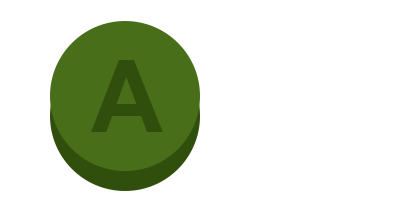
<style>
.page{position:relative;width:400px;height:200px;background:#ffffff}
.page>*{position:absolute;margin:0}
.t1{font:100px "Arial-BoldMT";color:#304e0c}
</style>
<div class="page">
<p class="t1" style="left:91px;top:60px;width:72px;height:72px">A</p>
</div>
